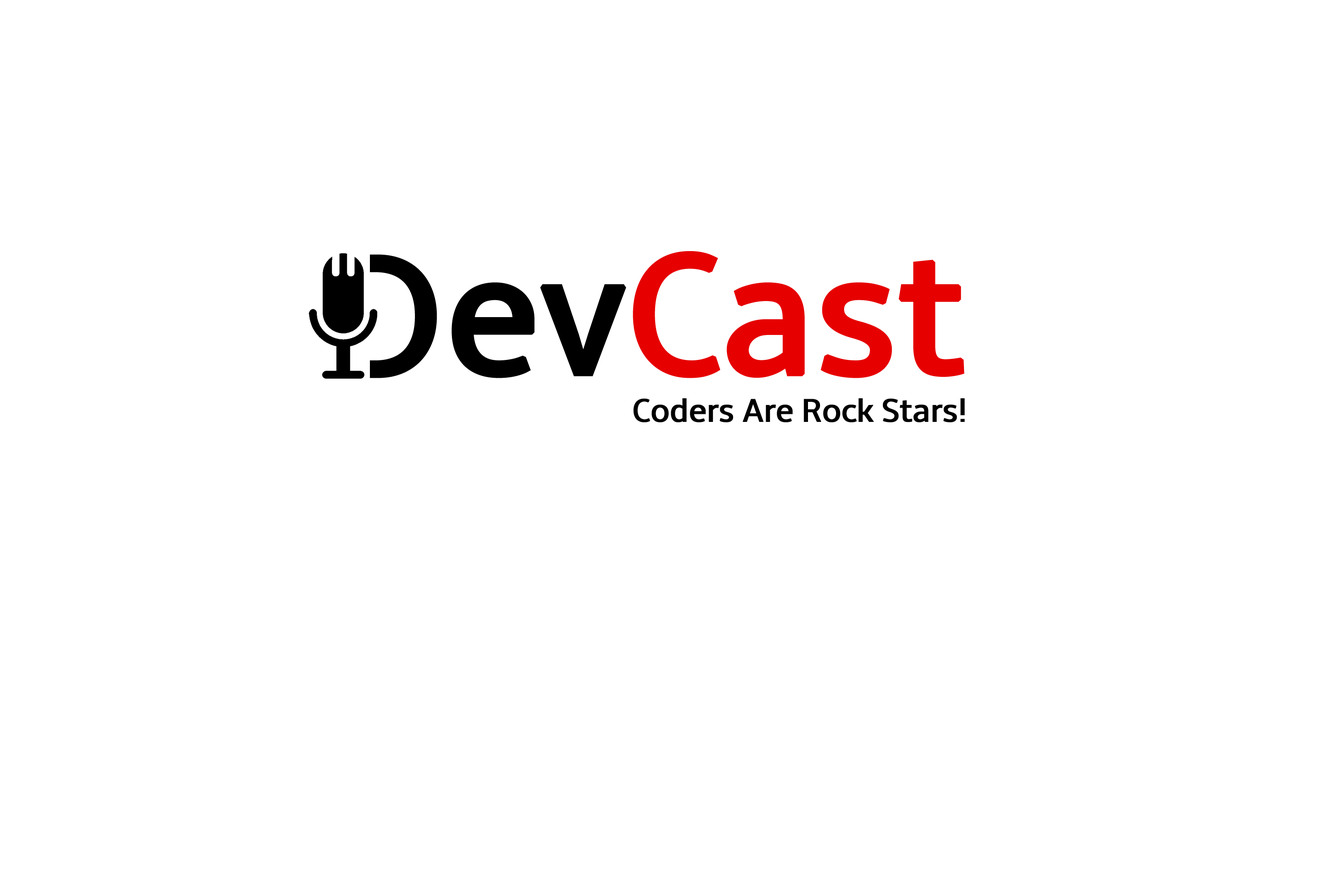
<style>
.page{position:relative;width:1337px;height:892px;background:#ffffff}
.page>*{position:absolute;margin:0}
.t1{font:178.3px "Amble-Regular";letter-spacing:-0.04em;color:#e60000;font-weight:bold}
.t2{font:178.3px "Amble-Regular";letter-spacing:-0.04em;color:#000000;font-weight:bold}
.t3{font:33.8px "Amble-Regular";letter-spacing:-0.04em;color:#000000;font-weight:bold}
</style>
<div class="page">
<p class="t1" style="left:452px;top:251px;width:513px;height:127px"><span class="t2">ev</span>Cast</p>
<p class="t3" style="left:633px;top:398px;width:332px;height:24px">Coders Are Rock Stars!</p>
</div>
